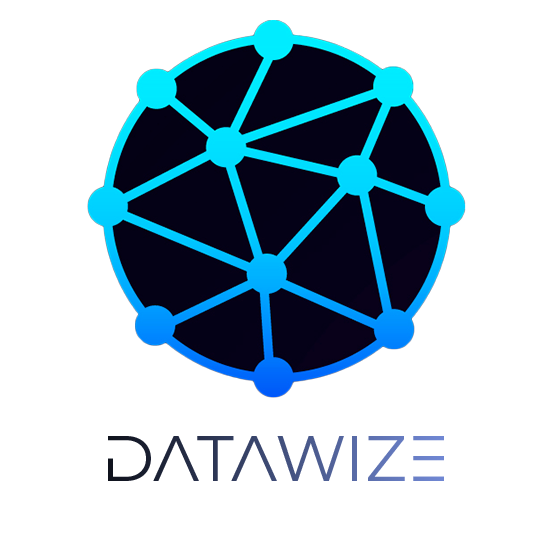
<style>
.page{position:relative;width:550px;height:550px;background:#ffffff}
.page>*{position:absolute;margin:0}
.t1{font:64px "MontserratAlt1-Regular"}
</style>
<div class="page">
<p class="t1" style="left:108px;top:436px;width:336px;height:45px">DATAWIZE</p>
</div>
